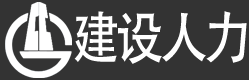
<style>
.page{position:relative;width:249px;height:80px;background:#333333}
.page>*{position:absolute;margin:0}
.t1{font:56.6px "AdobeHeitiStd-Regular";letter-spacing:-0.08em;color:#ffffff;scale:0.84 1}
</style>
<div class="page">
<p class="t1" style="left:74px;top:11px;width:173px;height:53px">建设人力</p>
</div>
